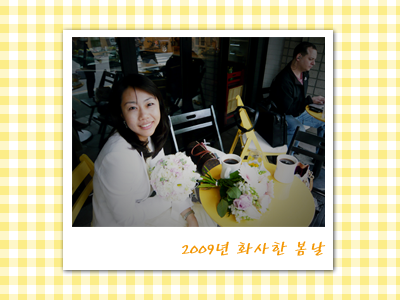
<style>
.page{position:relative;width:400px;height:300px;background:#ffffff}
.page>*{position:absolute;margin:0}
.t1{font:18px "HYbdaL";letter-spacing:-0.05em;color:#f39500;font-style:italic}
</style>
<div class="page">
<p class="t1" style="left:182px;top:241px;width:144px;height:15px">2009년 화사한 봄날</p>
</div>
